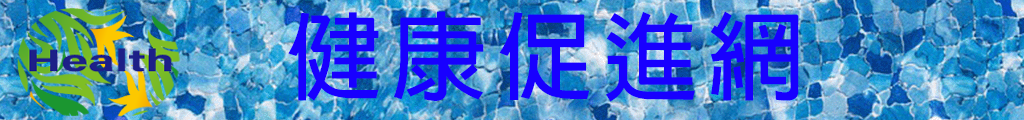
<style>
.page{position:relative;width:1024px;height:120px}
.page>*{position:absolute;margin:0}
.t1{font:96.1px "AdobeFanHeitiStd-Bold";letter-spacing:0.1em;color:#1800ff}
</style>
<div class="page">
<p class="t1" style="left:288px;top:11px;width:511px;height:91px">健康促進網</p>
</div>
